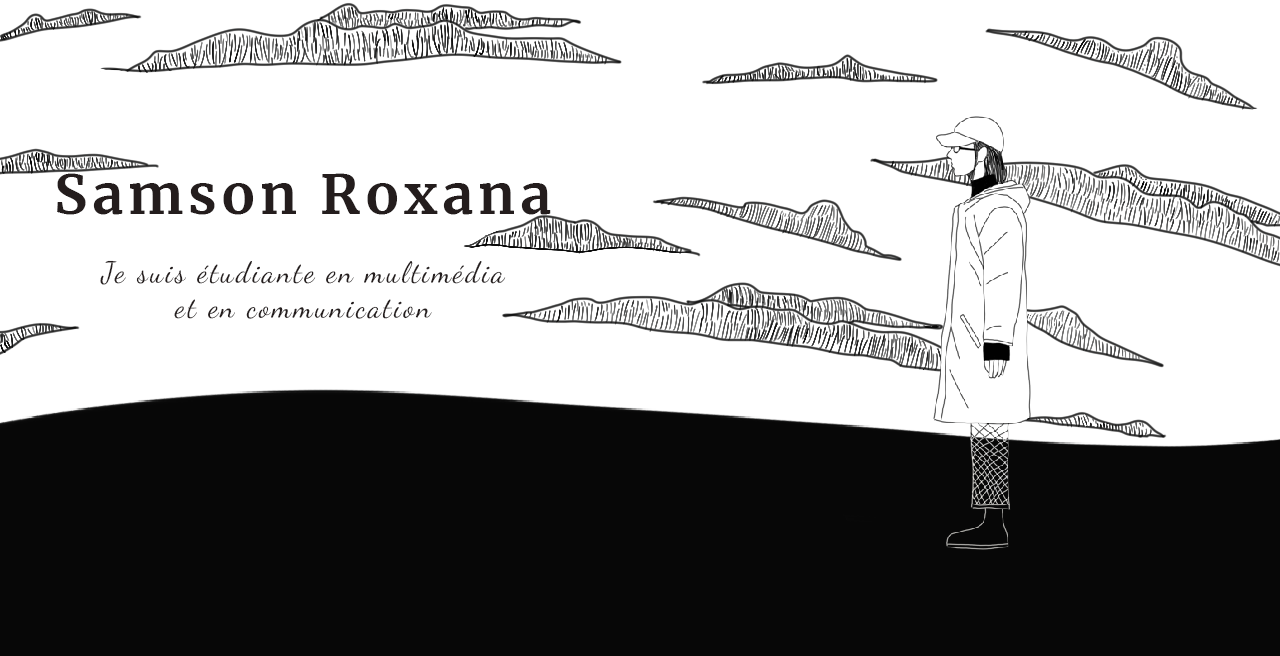
<style>
.page{position:relative;width:1280px;height:656px;background:#ffffff}
.page>*{position:absolute;margin:0}
.t1{font:55px "Merriweather-Bold";letter-spacing:0.085em;color:#241d1d}
.t2{font:29.3px "DancingScript-Regular";letter-spacing:0.085em;color:#241d1d}
</style>
<div class="page">
<p class="t1" style="left:57px;top:173px;width:494px;height:42px">Samson Roxana</p>
<p class="t2" style="left:100px;top:260px;width:406px;height:59px;text-align:center">Je suis étudiante en multimédia et en communication</p>
</div>
